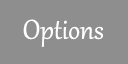
<style>
.page{position:relative;width:128px;height:64px;background:#8e8e8e}
.page>*{position:absolute;margin:0}
.t1{font:33px "Gabriola";color:#ffffff}
</style>
<div class="page">
<p class="t1" style="left:23px;top:19px;width:80px;height:28px">Options</p>
</div>
